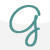
<style>
.page{position:relative;width:50px;height:50px;background:#f3f3f3}
.page>*{position:absolute;margin:0}
.t1{font:37.3px "Sacramento-Regular";color:#4e9292;font-weight:bold}
</style>
<div class="page">
<p class="t1" style="left:9px;top:4px;width:32px;height:43px">G</p>
</div>
